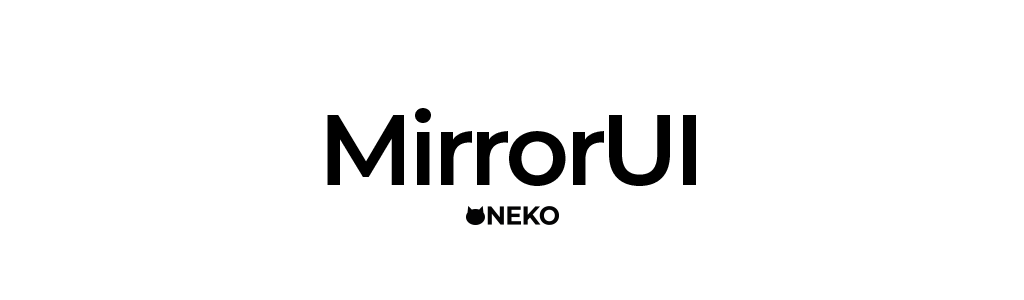
<style>
.page{position:relative;width:1024px;height:300px;background:#ffffff}
.page>*{position:absolute;margin:0}
.t1{font:100px "Montserrat-SemiBold";letter-spacing:-0.05em;color:#000000}
</style>
<div class="page">
<p class="t1" style="left:327px;top:108px;width:369px;height:78px">MirrorUI</p>
</div>
